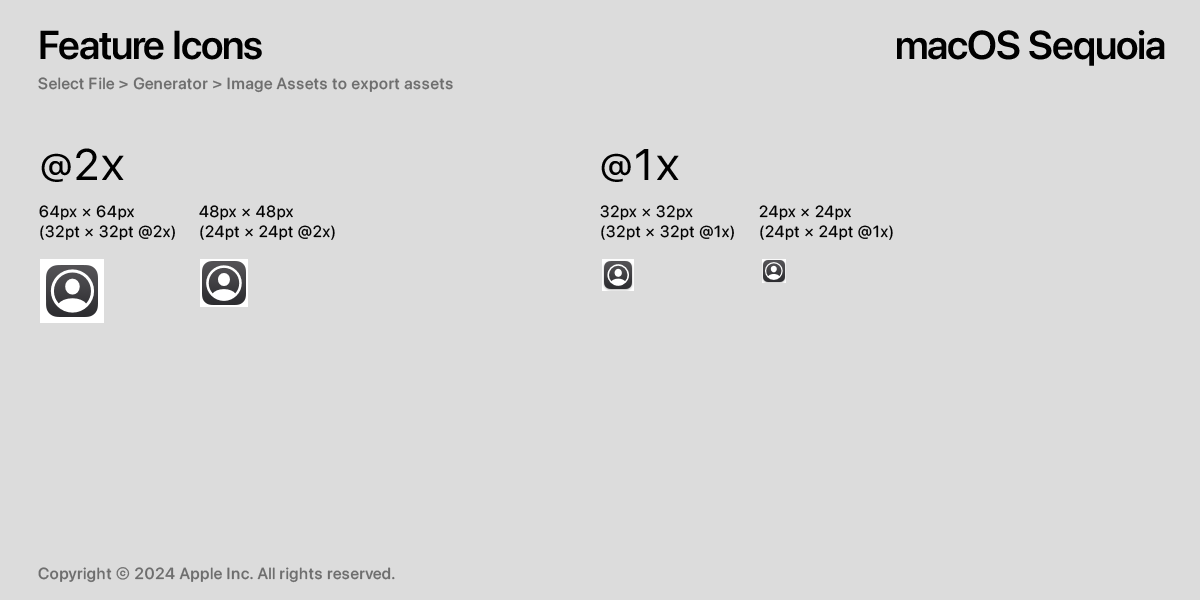
<style>
.page{position:relative;width:1200px;height:600px;background:#dcdcdc}
.page>*{position:absolute;margin:0}
.t1{font:40px "SFPro-Semibold";color:#000000}
.t2{font:16px "SFPro-Medium";letter-spacing:0.05em;color:#6e6e6e}
.t3{font:44px "SFPro-Regular";letter-spacing:0.05em;color:#000000;font-variant:small-caps}
.t4{font:16px/20px "SFPro-Regular";letter-spacing:0.05em;color:#000000}
</style>
<div class="page">
<p class="t1" style="left:40px;top:30px;width:222px;height:30px">Feature Icons</p>
<p class="t1" style="left:897px;top:30px;width:268px;height:36px">macOS Sequoia</p>
<p class="t2" style="left:38px;top:77px;width:415px;height:16px">Select File &gt; Generator &gt; Image Assets to export assets</p>
<p class="t3" style="left:41px;top:148px;width:83px;height:34px">@2x</p>
<p class="t3" style="left:601px;top:149px;width:78px;height:33px">@1x</p>
<p class="t4" style="left:39px;top:205px;width:136px;height:35px">64px × 64px<br>(32pt × 32pt @2x)</p>
<p class="t4" style="left:199px;top:205px;width:136px;height:35px">48px × 48px<br>(24pt × 24pt @2x)</p>
<p class="t4" style="left:600px;top:205px;width:134px;height:35px">32px × 32px<br>(32pt × 32pt @1x)</p>
<p class="t4" style="left:759px;top:205px;width:134px;height:35px">24px × 24px<br>(24pt × 24pt @1x)</p>
<p class="t2" style="left:38px;top:567px;width:357px;height:16px">Copyright © 2024 Apple Inc. All rights reserved.</p>
</div>
